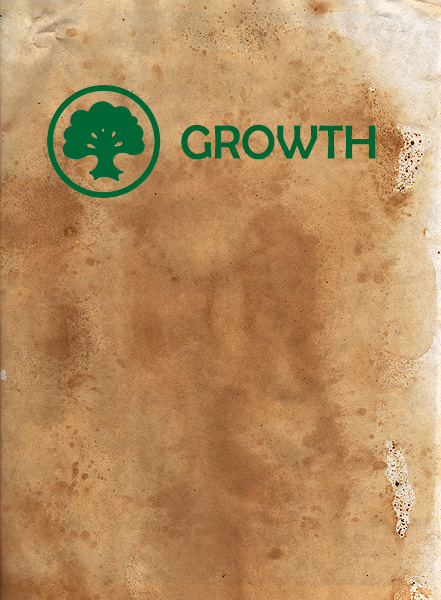
<style>
.page{position:relative;width:441px;height:600px}
.page>*{position:absolute;margin:0}
.t1{font:48px "BerlinSansFB-Reg";color:#006633}
</style>
<div class="page">
<p class="t1" style="left:181px;top:124px;width:195px;height:36px">GROWTH</p>
</div>
